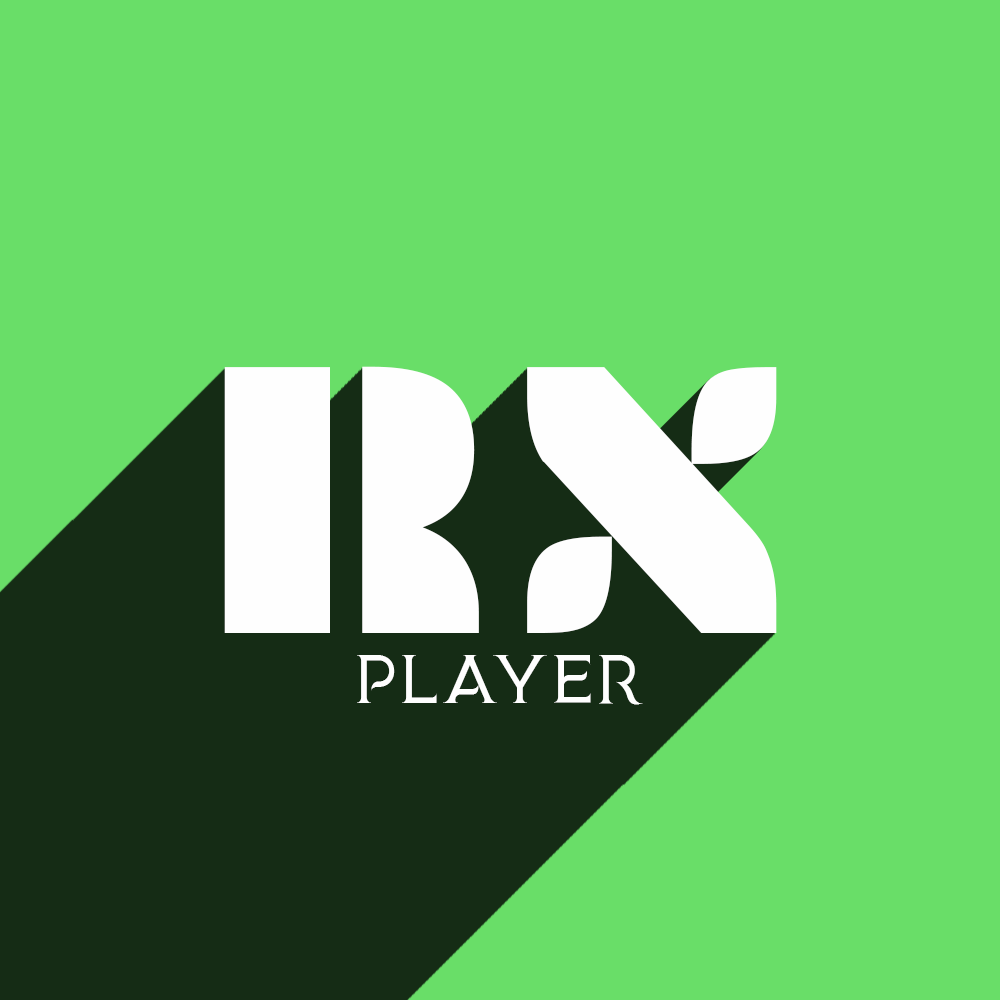
<style>
.page{position:relative;width:1000px;height:1000px;background:#69de68}
.page>*{position:absolute;margin:0}
.t1{font:400px "Plaster-Regular";color:#fefefe}
.t2{font:60px "MedusaGothic";color:#fefefe}
</style>
<div class="page">
<p class="t1" style="left:224px;top:366px;width:553px;height:267px">RX</p>
<p class="t2" style="left:357px;top:655px;width:286px;height:50px">PLAYER</p>
</div>
